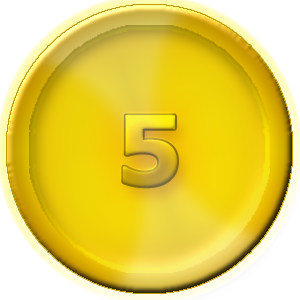
<style>
.page{position:relative;width:300px;height:300px}
.page>*{position:absolute;margin:0}
.t1{font:95.2px "Verdana-Bold";color:#a98f02}
</style>
<div class="page">
<p class="t1" style="left:123px;top:115px;width:54px;height:72px;opacity:0.74">5</p>
</div>
